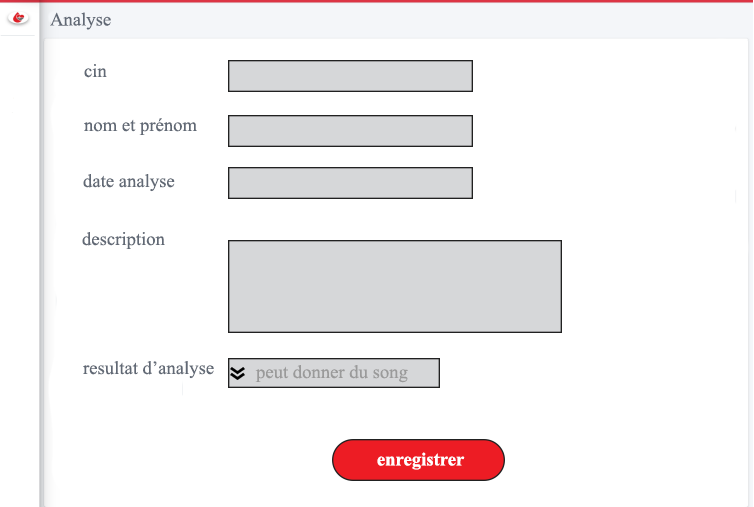
<style>
.page{position:relative;width:754px;height:507px;background:#ffffff}
.page>*{position:absolute;margin:0}
.t1{font:18.7px "TimesNewRomanPSMT";color:#616975}
.t2{font:18.7px "TimesNewRomanPSMT";color:#9a9a9a}
.t3{font:18.7px "TimesNewRomanPS-BoldMT";color:#ffffff}
</style>
<div class="page">
<p class="t1" style="left:50px;top:12px;width:61px;height:18px">Analyse</p>
<p class="t1" style="left:84px;top:64px;width:23px;height:14px">cin</p>
<p class="t1" style="left:84px;top:118px;width:113px;height:17px">nom et prénom</p>
<p class="t1" style="left:83px;top:174px;width:92px;height:18px">date analyse</p>
<p class="t1" style="left:82px;top:232px;width:83px;height:17px">description</p>
<p class="t1" style="left:83px;top:361px;width:131px;height:18px">resultat d’analyse</p>
<p class="t2" style="left:255px;top:365px;width:153px;height:18px">peut donner du song</p>
<p class="t3" style="left:377px;top:452px;width:88px;height:18px">enregistrer</p>
</div>
